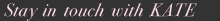
<style>
.page{position:relative;width:220px;height:21px;background:#333333}
.page>*{position:absolute;margin:0}
.t1{font:18px "BodoniSvtyTwoOSITCTTBookIt";letter-spacing:0.034em;color:#fbd7e7}
</style>
<div class="page">
<p class="t1" style="left:4px;top:3px;width:193px;height:18px">Stay in touch with KATE</p>
</div>
